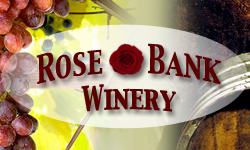
<style>
.page{position:relative;width:250px;height:150px}
.page>*{position:absolute;margin:0}
.t1{font:24.8px "CapitalsRegular";color:#5b0000}
.t2{font:22px "CapitalsRegular";color:#5b0000}
</style>
<div class="page">
<p class="t1" style="left:36px;top:43px;width:185px;height:69px;text-align:center">Rose     Bank <br><span class="t2">Winery</span></p>
</div>
